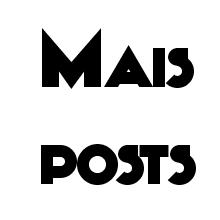
<style>
.page{position:relative;width:220px;height:220px;background:#ffffff}
.page>*{position:absolute;margin:0}
.t1{font:80.7px "KiloGram";color:#000000;font-variant:small-caps}
</style>
<div class="page">
<p class="t1" style="left:41px;top:28px;width:155px;height:157px;text-align:center">Mais<br>posts</p>
</div>
